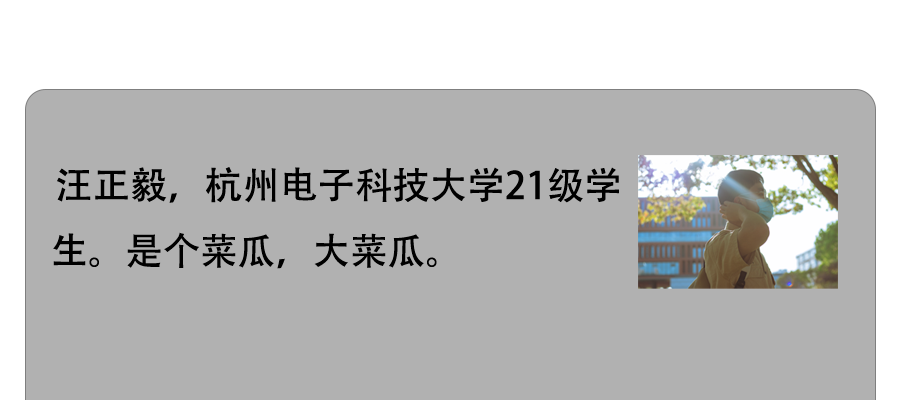
<style>
.page{position:relative;width:900px;height:400px;background:#b1b1b1}
.page>*{position:absolute;margin:0}
.t1{font:37.5px "AdobeHeitiStd-Regular";color:#000000}
</style>
<div class="page">
<p class="t1" style="left:53px;top:167px;width:566px;height:102px">汪正毅，杭州电子科技大学21级学生。是个菜瓜，大菜瓜。</p>
</div>
